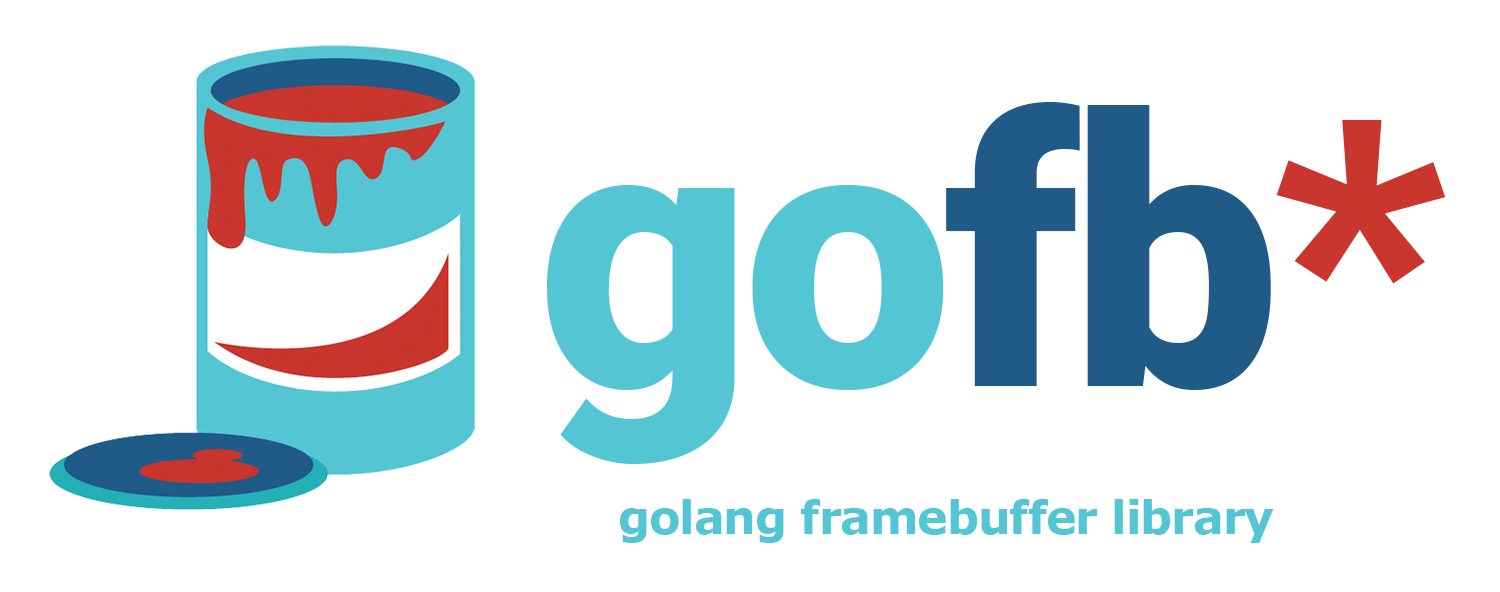
<style>
.page{position:relative;width:1500px;height:592px;background:#ffffff}
.page>*{position:absolute;margin:0}
.t1{font:374.4px "Roboto-Black";letter-spacing:-0.025em;color:#54c5d3}
.t2{font:374.4px "Roboto-Black";letter-spacing:-0.025em;color:#1f5b86}
.t3{font:374.4px "Roboto-Black";letter-spacing:-0.025em;color:#c8362e}
.t4{font:45.9px "Verdana-Bold";letter-spacing:-0.025em;color:#54c5d3}
</style>
<div class="page">
<p class="t1" style="left:547px;top:102px;width:899px;height:362px">go<span class="t2">fb</span><span class="t3">*</span></p>
<p class="t4" style="left:620px;top:499px;width:654px;height:44px">golang framebuffer library</p>
</div>
